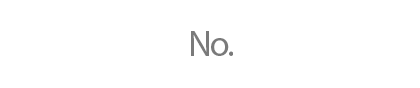
<style>
.page{position:relative;width:420px;height:88px;background:#ffffff}
.page>*{position:absolute;margin:0}
.t1{font:36px "MyriadPro-Regular";letter-spacing:-0.05em;color:#7a7a7a}
</style>
<div class="page">
<p class="t1" style="left:191px;top:31px;width:42px;height:25px">No.</p>
</div>
